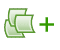
<style>
.page{position:relative;width:60px;height:50px;background:#ffffff}
.page>*{position:absolute;margin:0}
.t1{font:30px "ArialMT";color:#339900}
</style>
<div class="page">
<p class="t1" style="left:39px;top:17px;width:15px;height:15px">+</p>
</div>
